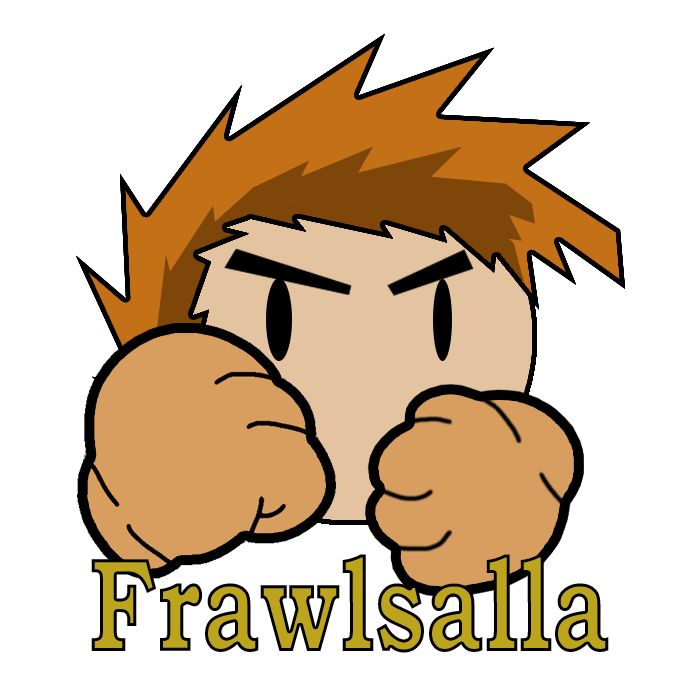
<style>
.page{position:relative;width:700px;height:700px;background:#ffffff}
.page>*{position:absolute;margin:0}
.t1{font:134.4px "BookmanOldStyle-Bold";scale:0.74 1}
</style>
<div class="page">
<p class="t1" style="left:91px;top:554px;width:518px;height:99px">Frawlsalla</p>
</div>
